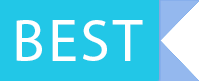
<style>
.page{position:relative;width:199px;height:81px;background:#22c7e7}
.page>*{position:absolute;margin:0}
.t1{font:60px "MyriadPro-Regular";letter-spacing:0.05em;color:#ffffff;text-transform:uppercase}
</style>
<div class="page">
<p class="t1" style="left:16px;top:20px;width:127px;height:41px">BEST</p>
</div>
